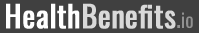
<style>
.page{position:relative;width:199px;height:33px;background:#404040}
.page>*{position:absolute;margin:0}
.t1{font:30px "Oswald-Regular";color:#d9d9d9;font-weight:bold}
.t2{font:30px "Oswald-Regular";color:#ffffff;font-weight:bold}
.t3{font:26px "Oswald-Regular";color:#929292}
.t4{font:20px "Oswald-Regular";color:#929292}
</style>
<div class="page">
<p class="t1" style="left:6px;top:3px;width:187px;height:26px"><span class="t2">Health</span>Benefits<span class="t3">.</span><span class="t4">io</span></p>
</div>
